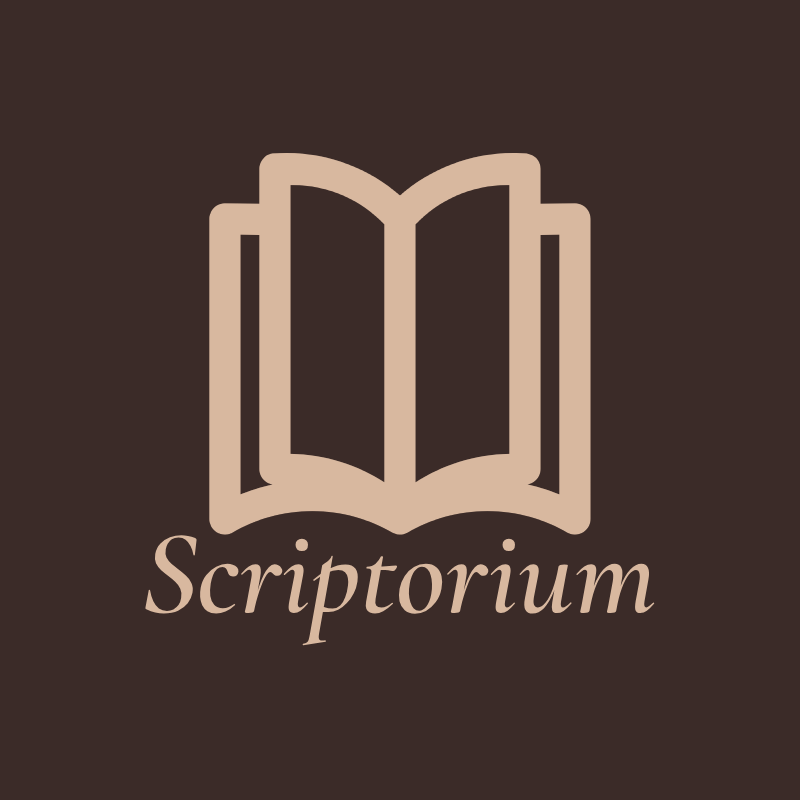
<style>
.page{position:relative;width:800px;height:800px;background:#3b2b28}
.page>*{position:absolute;margin:0}
.t1{font:120.8px "CormorantGaramond-SemiBoldItalic";color:#d8b89f}
</style>
<div class="page">
<p class="t1" style="left:145px;top:535px;width:510px;height:111px">Scriptorium</p>
</div>
